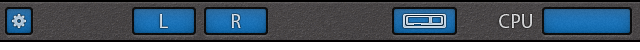
<style>
.page{position:relative;width:640px;height:50px}
.page>*{position:absolute;margin:0}
.t1{font:20px "MyriadPro-Regular";color:#cfdeea}
.t2{font:20px "MyriadPro-Regular";color:#cfdde9}
.t3{font:20px "MyriadPro-Regular";color:#d6d6d7}
</style>
<div class="page">
<p class="t1" style="left:160px;top:14px;width:8px;height:14px">L</p>
<p class="t2" style="left:232px;top:14px;width:9px;height:14px">R</p>
<p class="t3" style="left:499px;top:14px;width:33px;height:14px">CPU</p>
</div>
